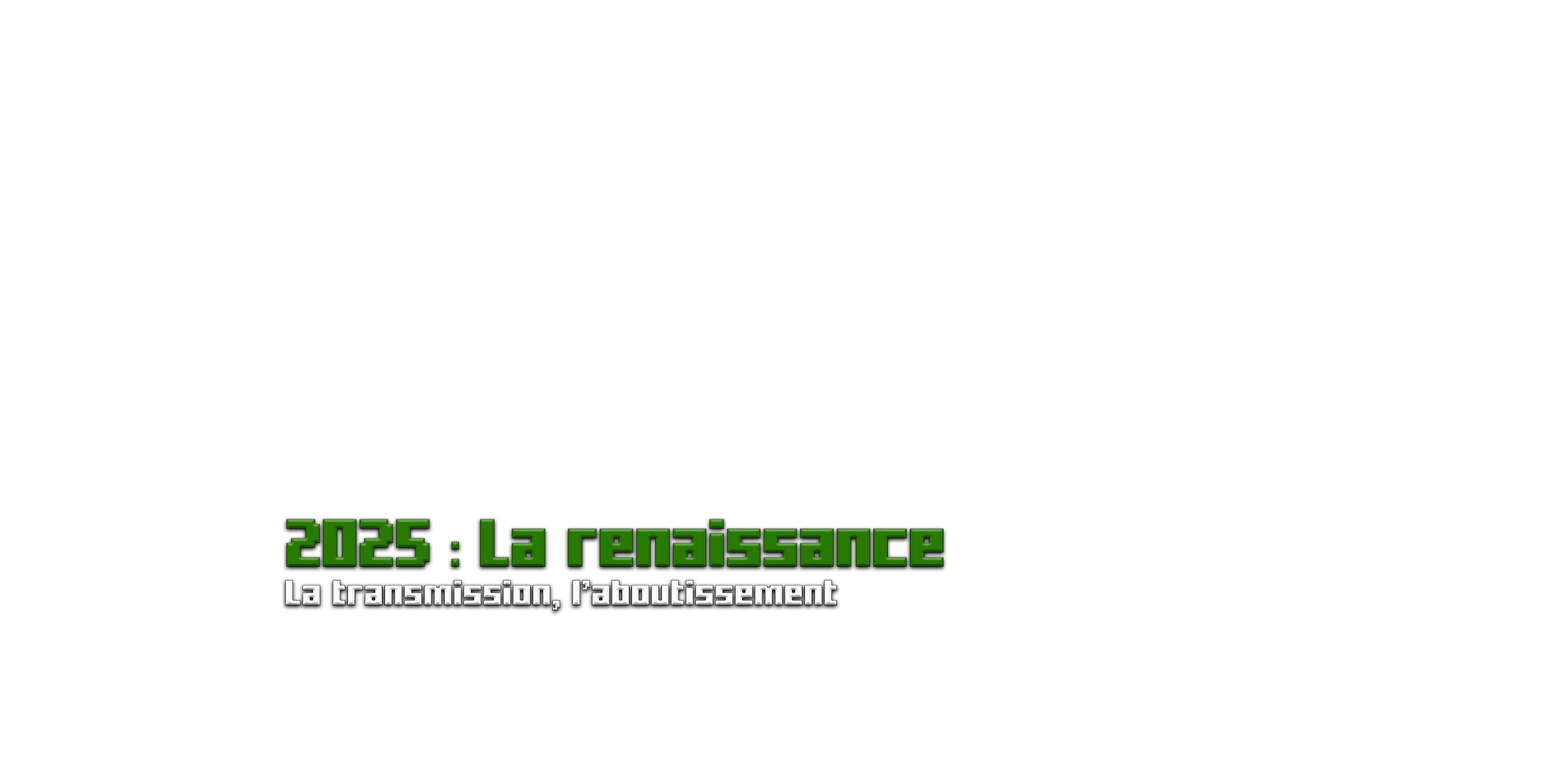
<style>
.page{position:relative;width:1544px;height:772px;background:#ffffff}
.page>*{position:absolute;margin:0}
.t1{font:25.7px/38.6px "MinercraftoryRegular";color:#fffefe}
.t2{font:48.7px/38.6px "MinercraftoryRegular";letter-spacing:-0.01em;color:#287a03}
.t3{font:48.7px/38.6px "Impact";letter-spacing:-0.01em;color:#287a03}
</style>
<div class="page">
<p class="t1" style="left:285px;top:519px;width:659px;height:92px"><span class="t2">2025 </span><span class="t3">:</span><span class="t2"> La renaissance<br></span>La transmission, l’aboutissement</p>
</div>
